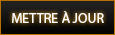
<style>
.page{position:relative;width:115px;height:35px}
.page>*{position:absolute;margin:0}
.t1{font:14px "MyriadPro-Regular";color:#ffffff}
</style>
<div class="page">
<p class="t1" style="left:12px;top:11px;width:92px;height:12px">METTRE À JOUR</p>
</div>
